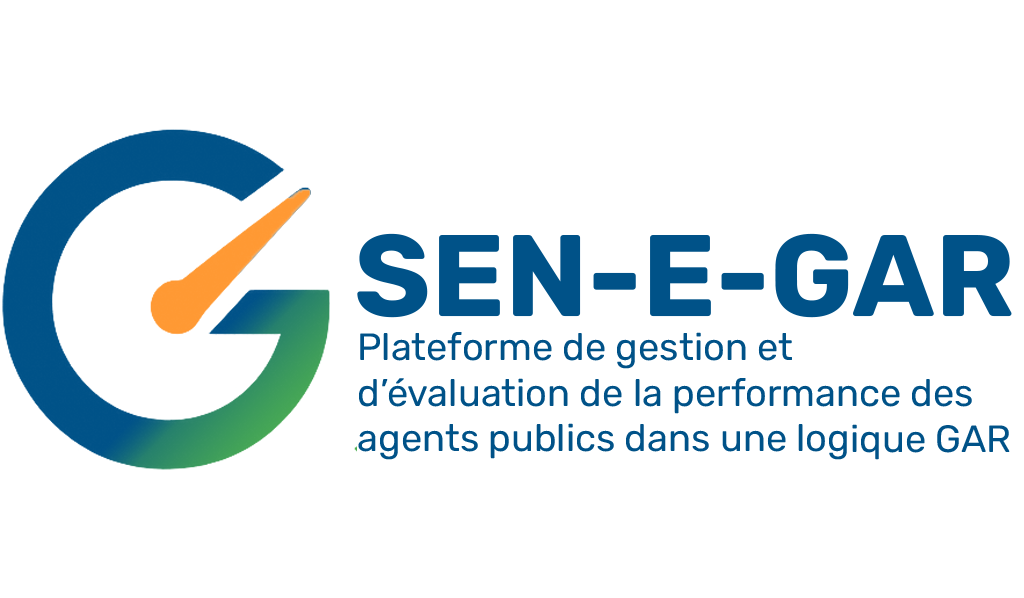
<style>
.page{position:relative;width:1024px;height:598px;background:#ffffff}
.page>*{position:absolute;margin:0}
.t1{font:115.6px "Rubik-Bold";color:#005288}
.t2{font:38px "Rubik-Regular";color:#005288}
</style>
<div class="page">
<p class="t1" style="left:357px;top:233px;width:655px;height:85px">SEN-E-GAR</p>
<p class="t2" style="left:358px;top:332px;width:652px;height:128px">Plateforme de gestion et d’évaluation de la performance des agents publics dans une logique GAR</p>
</div>
